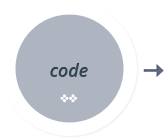
<style>
.page{position:relative;width:164px;height:140px;background:#ffffff}
.page>*{position:absolute;margin:0}
.t1{font:18px "OpenSans-SemiboldItalic";color:#32464f}
</style>
<div class="page">
<p class="t1" style="left:50px;top:63px;width:38px;height:14px">code</p>
</div>
